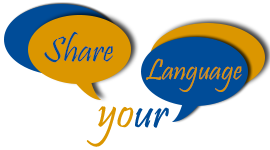
<style>
.page{position:relative;width:270px;height:150px;background:#ffffff}
.page>*{position:absolute;margin:0}
.t1{font:36px "Pristina-Regular";color:#004c98}
.t2{font:30px "Pristina-Regular";color:#db9600}
.t3{font:48px "Pristina-Regular";color:#db9600}
.t4{font:48px "Pristina-Regular";color:#004c98}
</style>
<div class="page">
<p class="t1" style="left:44px;top:31px;width:69px;height:32px">Share</p>
<p class="t2" style="left:146px;top:58px;width:96px;height:34px">Language</p>
<p class="t3" style="left:86px;top:106px;width:83px;height:41px;rotate:1deg">yo<span class="t4">ur</span></p>
</div>
